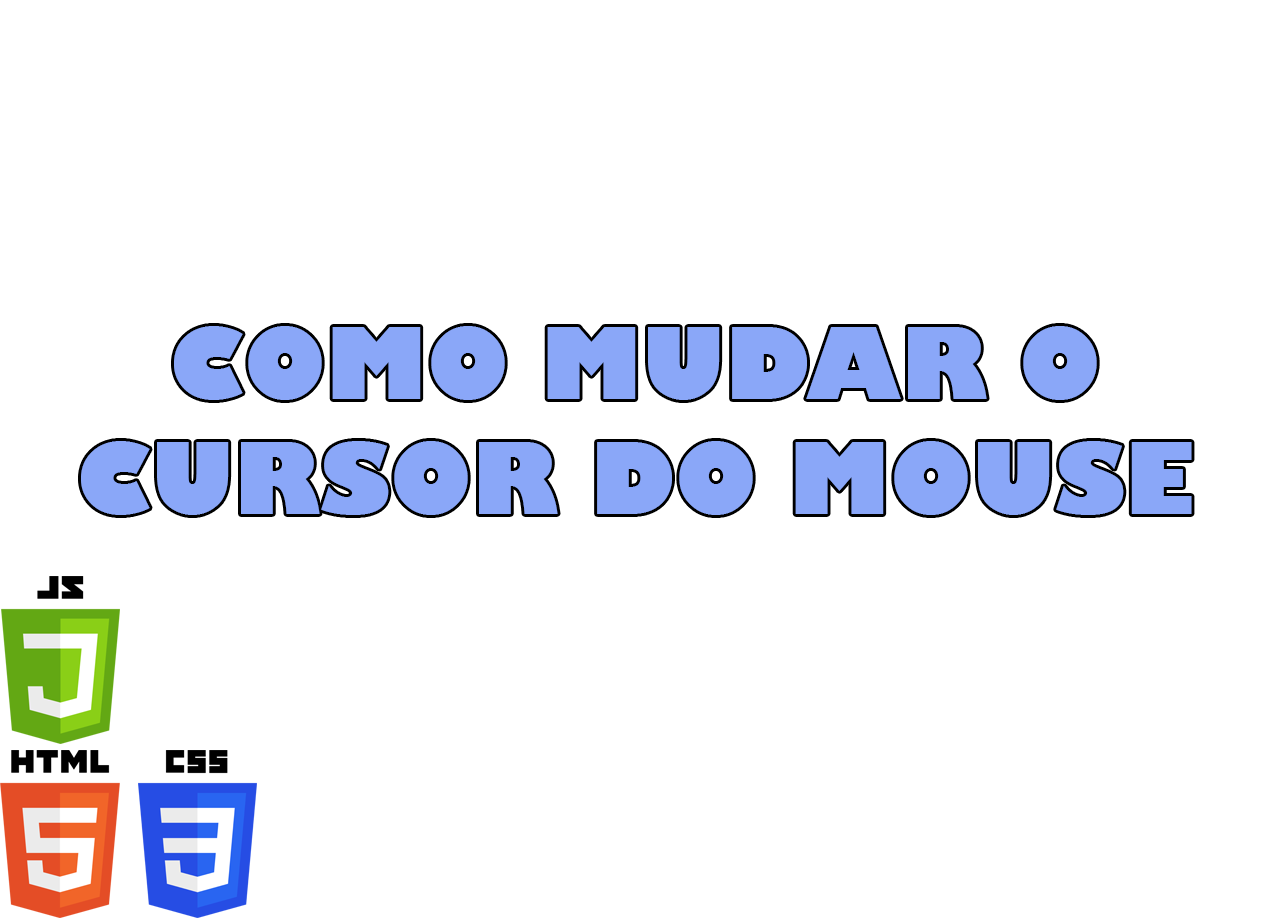
<style>
.page{position:relative;width:1262px;height:918px;background:#ffffff}
.page>*{position:absolute;margin:0}
.t1{font:96px "GillSans-UltraBold";color:#8aa7f8}
</style>
<div class="page">
<p class="t1" style="left:81px;top:326px;width:1111px;height:189px;text-align:center">COMO MUDAR O<br>CURSOR DO MOUSE</p>
</div>
